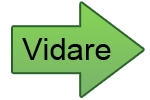
<style>
.page{position:relative;width:150px;height:100px;background:#ffffff}
.page>*{position:absolute;margin:0}
.t1{font:31.2px "ArialMT";color:#000000}
</style>
<div class="page">
<p class="t1" style="left:22px;top:38px;width:89px;height:22px">Vidare</p>
</div>
